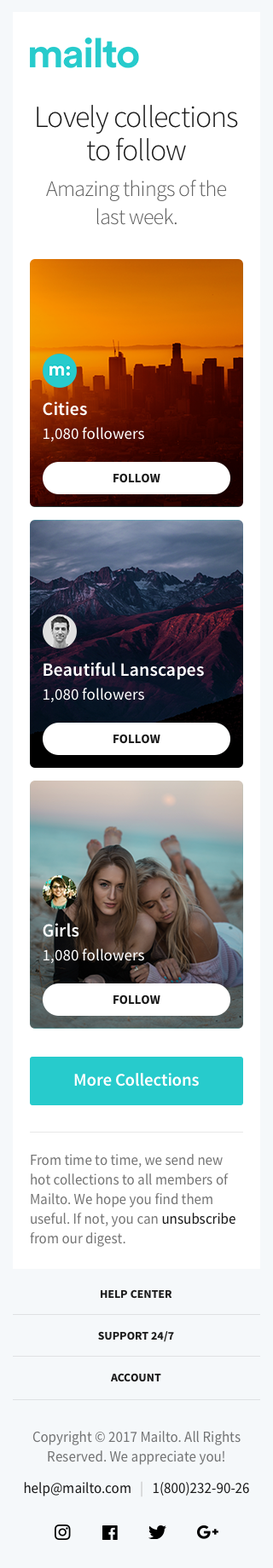
<style>
.page{position:relative;width:273px;height:1568px;background:#ffffff}
.page>*{position:absolute;margin:0}
.t1{font:30.7px/33.2px "SourceSansPro-Light";letter-spacing:-0.03em;color:#1a1a1a}
.t2{font:22.2px/28.1px "SourceSansPro-Light";letter-spacing:-0.027em;color:#5e5e5e}
.t3{font:18.7px "SourceSansPro-Semibold";color:#ffffff}
.t4{font:16.2px "SourceSansPro-Regular";letter-spacing:0.002em;color:#ffffff}
.t5{font:12.8px "SourceSansPro-Bold";color:#1a1a1a;text-transform:uppercase}
.t6{font:17.9px "SourceSansPro-Semibold";letter-spacing:-0.01em;color:#ffffff}
.t7{font:14.5px/19.6px "SourceSansPro-Regular";color:#767676}
.t8{font:14.5px/19.6px "SourceSansPro-Regular";color:#1a1a1a}
.t9{font:11.9px/41.8px "SourceSansPro-Bold";color:#1a1a1a}
.t10{font:14.5px/19.6px "SourceSansPro-Regular";color:#727374}
.t11{font:14.5px/19.6px "SourceSansPro-Regular";color:#bebebe}
</style>
<div class="page">
<p class="t1" style="left:37px;top:105px;width:201px;height:56px;text-align:center">Lovely collections to follow</p>
<p class="t2" style="left:46px;top:180px;width:181px;height:45px;text-align:center">Amazing things of the <br>last week.</p>
<p class="t3" style="left:43px;top:401px;width:44px;height:15px">Cities</p>
<p class="t4" style="left:43px;top:427px;width:101px;height:15px">1,080 followers</p>
<p class="t5" style="left:113px;top:473px;width:47px;height:10px">follow</p>
<p class="t3" style="left:43px;top:662px;width:161px;height:18px">Beautiful Lanscapes</p>
<p class="t4" style="left:43px;top:688px;width:101px;height:15px">1,080 followers</p>
<p class="t5" style="left:113px;top:734px;width:47px;height:10px">follow</p>
<p class="t3" style="left:43px;top:923px;width:36px;height:14px">Girls</p>
<p class="t4" style="left:43px;top:948px;width:101px;height:16px">1,080 followers</p>
<p class="t5" style="left:113px;top:994px;width:47px;height:11px">follow</p>
<p class="t6" style="left:74px;top:1073px;width:125px;height:14px">More Collections</p>
<p class="t7" style="left:30px;top:1154px;width:205px;height:93px">From time to time, we send new hot collections to all members of Mailto. We hope you find them useful. If not, you can<span class="t8"> unsubscribe </span>from our digest.</p>
<p class="t9" style="left:98px;top:1289px;width:76px;height:93px;text-align:center">HELP CENTER<br>SUPPORT 24/7<br>ACCOUNT</p>
<p class="t10" style="left:24px;top:1431px;width:225px;height:66px;text-align:center">Copyright © 2017 Mailto. All Rights Reserved. We appreciate you!<br><span class="t8">help@mailto.com   </span><span class="t11">|   </span><span class="t8">1(800)232-90-26</span></p>
</div>
